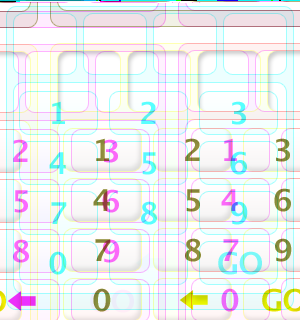
<style>
.page{position:relative;width:300px;height:320px}
.page>*{position:absolute;margin:0}
.t1{font:30px "LucidaGrande-Bold";letter-spacing:-0.03em}
.t2{font:30px "LucidaGrande-Bold";letter-spacing:-0.03em;color:#57ffff}
</style>
<div class="page">
<p class="t1" style="left:52px;top:100px;width:13px;height:23px">1</p>
<p class="t1" style="left:141px;top:100px;width:15px;height:23px">2</p>
<p class="t1" style="left:232px;top:100px;width:14px;height:24px">3</p>
<p class="t1" style="left:230px;top:150px;width:17px;height:24px">6</p>
<p class="t2" style="left:49px;top:151px;width:17px;height:22px">4</p>
<p class="t1" style="left:142px;top:151px;width:14px;height:23px">5</p>
<p class="t1" style="left:51px;top:201px;width:16px;height:22px">7</p>
<p class="t1" style="left:141px;top:200px;width:16px;height:24px">8</p>
<p class="t1" style="left:231px;top:200px;width:17px;height:24px">9</p>
<p class="t1" style="left:49px;top:250px;width:18px;height:24px">0</p>
<p class="t1" style="left:218px;top:250px;width:44px;height:24px">GO</p>
</div>
